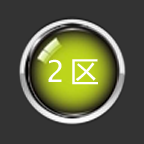
<style>
.page{position:relative;width:144px;height:144px;background:#333333}
.page>*{position:absolute;margin:0}
.t1{font:30px "LucidaSansUnicode";letter-spacing:-0.1em;color:#ffffff}
.t2{font:30px "MicrosoftYaHei";letter-spacing:-0.1em;color:#ffffff}
</style>
<div class="page">
<p class="t1" style="left:48px;top:59px;width:50px;height:26px">2<span class="t2">区</span></p>
</div>
